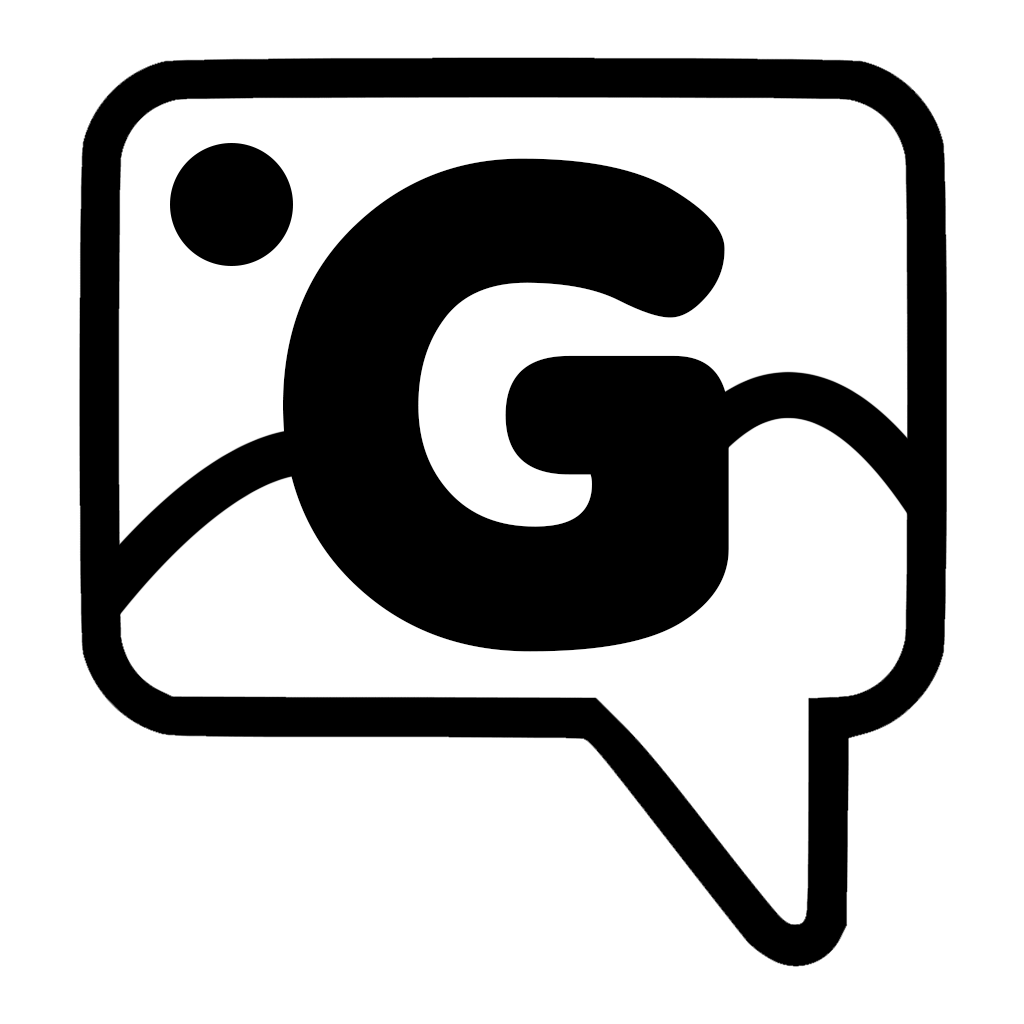
<style>
.page{position:relative;width:1024px;height:1024px;background:#ffffff}
.page>*{position:absolute;margin:0}
.t1{font:718.8px "Insaniburger";color:#000000;font-weight:bold}
</style>
<div class="page">
<p class="t1" style="left:283px;top:158px;width:446px;height:494px">G</p>
</div>
